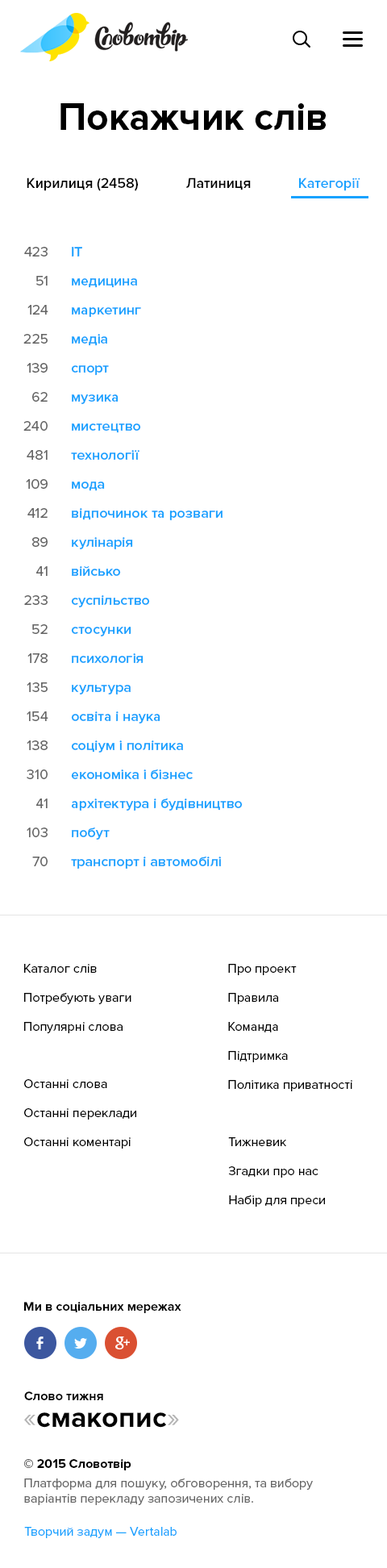
<style>
.page{position:relative;width:387px;height:1568px;background:#ffffff}
.page>*{position:absolute;margin:0}
.t1{font:38.7px "ProximaNova-Bold";color:#000000}
.t2{font:14.5px "ProximaNova-Semibold";color:#000000}
.t3{font:14.5px "ProximaNova-Semibold";color:#17a2ff}
.t4{font:14.5px/29px "ProximaNova-Regular";color:#666666}
.t5{font:14.5px/29px "ProximaNova-Semibold";color:#17a2ff}
.t6{font:12.9px/29px "ProximaNova-Regular";color:#000000}
.t7{font:12.9px/29px "ProximaNova-Regular";color:#010101}
.t8{font:12.9px "ProximaNova-Bold";color:#010101}
.t9{font:29px "ProximaNova-Bold";color:#000000}
.t10{font:29px "ProximaNova-Regular";color:#b3b3b3}
.t11{font:12.9px "ProximaNova-Regular";color:#666666}
.t12{font:12.9px/17.7px "ProximaNova-Bold";color:#000000}
.t13{font:12.9px/19.4px "ProximaNova-Regular";color:#666666}
.t14{font:12.9px "ProximaNova-Regular";color:#17a2ff}
</style>
<div class="page">
<p class="t1" style="left:60px;top:103px;width:266px;height:27px">Покажчик слів</p>
<p class="t2" style="left:27px;top:177px;width:111px;height:14px">Кирилиця (2458)</p>
<p class="t2" style="left:186px;top:177px;width:65px;height:13px">Латиниця</p>
<p class="t3" style="left:299px;top:177px;width:62px;height:14px">Категорії</p>
<p class="t4" style="left:23px;top:247px;width:25px;height:619px;text-align:right">423<br>51<br>124<br>225<br>139<br>62<br>240<br>481<br>109<br>412<br>89<br>41<br>233<br>52<br>178<br>135<br>154<br>138<br>310<br>41<br>103<br>70</p>
<p class="t5" style="left:71px;top:247px;width:172px;height:622px">IT<br>медицина<br>маркетинг<br>медіа<br>спорт<br>музика<br>мистецтво<br>технології<br>мода<br>відпочинок та розваги<br>кулінарія<br>військо<br>суспільство<br>стосунки<br>психологія<br>культура<br>освіта і наука<br>соціум і політика<br>економіка і бізнес<br>архітектура і будівництво<br>побут<br>транспорт і автомобілі</p>
<p class="t6" style="left:24px;top:964px;width:107px;height:69px">Каталог слів<br>Потребують уваги<br>Популярні слова</p>
<p class="t6" style="left:228px;top:964px;width:124px;height:127px">Про проект<br>Правила<br>Команда<br>Підтримка<br>Політика приватності</p>
<p class="t6" style="left:24px;top:1079px;width:112px;height:70px">Останні слова<br>Останні переклади<br>Останні коментарі</p>
<p class="t7" style="left:228px;top:1137px;width:97px;height:70px">Тижневик<br>Згадки про нас<br>Набір для преси</p>
<p class="t8" style="left:24px;top:1302px;width:157px;height:11px">Ми в соціальних мережах</p>
<p class="t8" style="left:24px;top:1391px;width:79px;height:9px">Слово тижня</p>
<p class="t9" style="left:24px;top:1412px;width:155px;height:16px"><span class="t10">«</span>смакопис<span class="t10">»</span></p>
<p class="t11" style="left:24px;top:1459px;width:289px;height:46px"><span class="t12">© 2015 Словотвір<br></span><span class="t13">Платформа для пошуку, обговорення, </span>та вибору<br>варіантів перекладу запозичених слів.</p>
<p class="t14" style="left:24px;top:1527px;width:153px;height:11px">Творчий задум — Vertalab</p>
</div>
